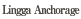
<style>
.page{position:relative;width:81px;height:19px;background:#ffffff}
.page>*{position:absolute;margin:0}
.t1{font:12px "RyuminPro-ExBold";letter-spacing:-0.08em;color:#4c4843;scale:0.85 1}
</style>
<div class="page">
<p class="t1" style="left:2px;top:5px;width:78px;height:11px">Lingga Anchorage</p>
</div>
